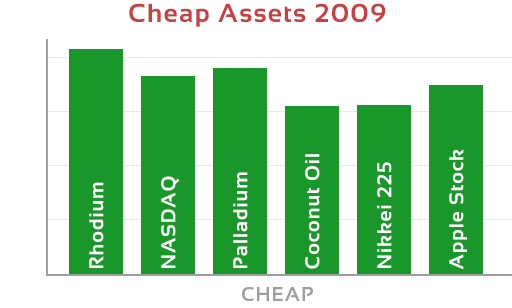
<style>
.page{position:relative;width:512px;height:308px;background:#ffffff}
.page>*{position:absolute;margin:0}
.t1{font:26px "Sansation-Bold";letter-spacing:0.05em;color:#c84040}
.t2{font:20px "Sansation-Bold";letter-spacing:0.05em;color:#ffffff}
.t3{font:20px "Sansation-Bold";letter-spacing:0.05em;color:#9f9fa0}
</style>
<div class="page">
<p class="t1" style="left:129px;top:3px;width:257px;height:24px">Cheap Assets 2009</p>
<p class="t2" style="left:449px;top:149px;width:18px;height:121px;rotate:-90deg">Apple Stock</p>
<p class="t2" style="left:305px;top:154px;width:15px;height:115px;rotate:-90deg">Coconut Oil</p>
<p class="t2" style="left:233px;top:172px;width:15px;height:96px;rotate:-90deg">Palladium</p>
<p class="t2" style="left:377px;top:162px;width:15px;height:106px;rotate:-90deg">Nikkei 225</p>
<p class="t2" style="left:89px;top:182px;width:15px;height:86px;rotate:-90deg">Rhodium</p>
<p class="t2" style="left:161px;top:176px;width:19px;height:92px;rotate:-90deg">NASDAQ</p>
<p class="t3" style="left:242px;top:287px;width:71px;height:14px">CHEAP</p>
</div>
